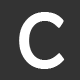
<style>
.page{position:relative;width:80px;height:80px;background:#333333}
.page>*{position:absolute;margin:0}
.t1{font:80px "BerlinSansFB-Reg";letter-spacing:0.02em;color:#ffffff}
</style>
<div class="page">
<p class="t1" style="left:19px;top:12px;width:46px;height:57px">C</p>
</div>
